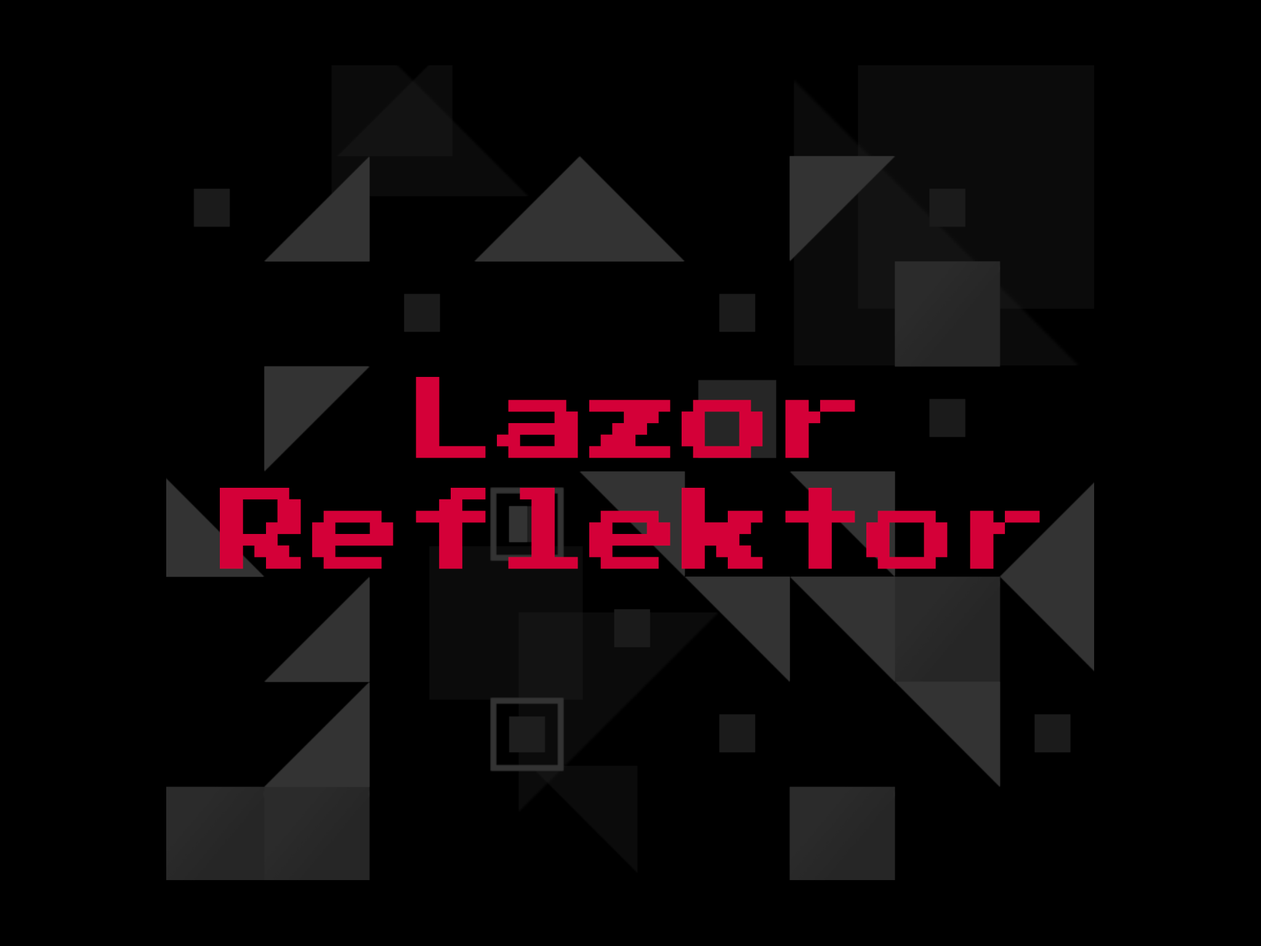
<style>
.page{position:relative;width:1261px;height:946px;background:#000000}
.page>*{position:absolute;margin:0}
.t1{font:92.4px "PressStart2P-Regular";color:#d40038}
</style>
<div class="page">
<p class="t1" style="left:220px;top:377px;width:820px;height:192px;text-align:center">Lazor<br>Reflektor</p>
</div>
